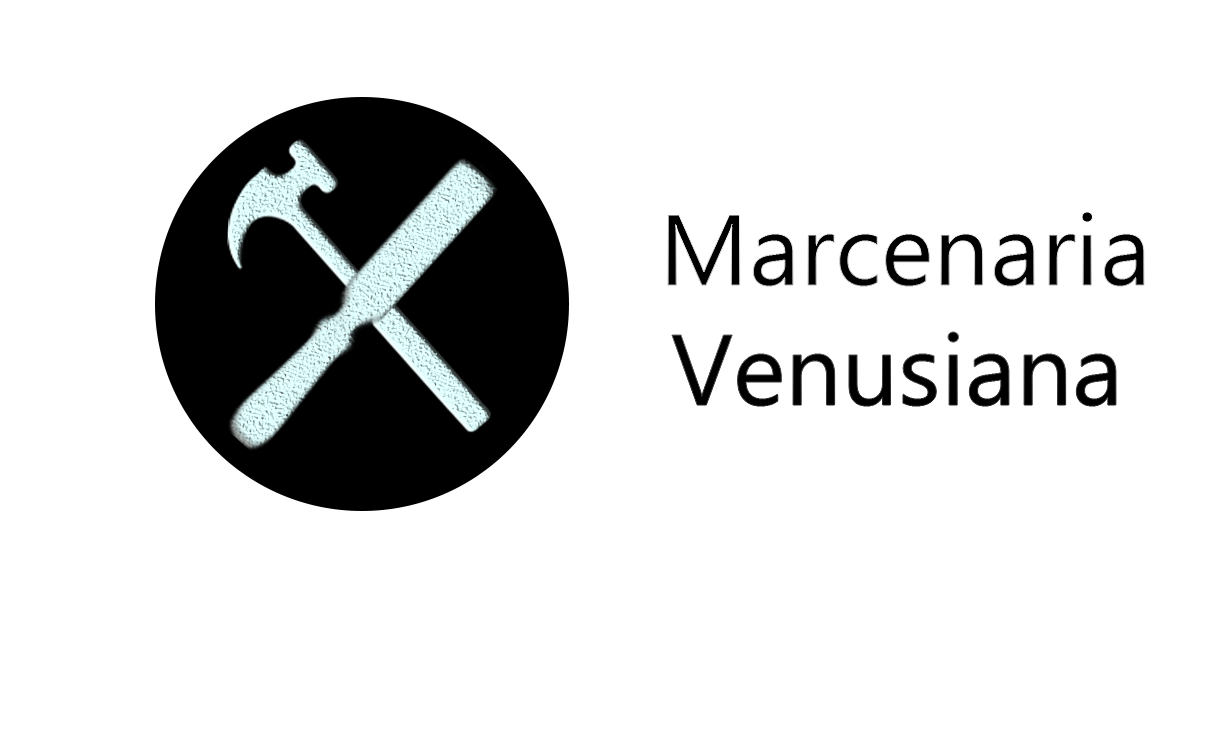
<style>
.page{position:relative;width:1231px;height:735px;background:#ffffff}
.page>*{position:absolute;margin:0}
.t1{font:100px "Ebrima";color:#000000}
</style>
<div class="page">
<p class="t1" style="left:668px;top:212px;width:476px;height:194px">Marcenaria<br> Venusiana</p>
</div>
